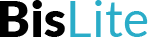
<style>
.page{position:relative;width:148px;height:37px;background:#ffffff}
.page>*{position:absolute;margin:0}
.t1{font:50px "Lato-Regular";color:#2aacc8}
.t2{font:50px "Lato-Black";color:#000000}
</style>
<div class="page">
<p class="t1" style="left:0px;top:0px;width:148px;height:37px"><span class="t2">Bis</span>Lite</p>
</div>
